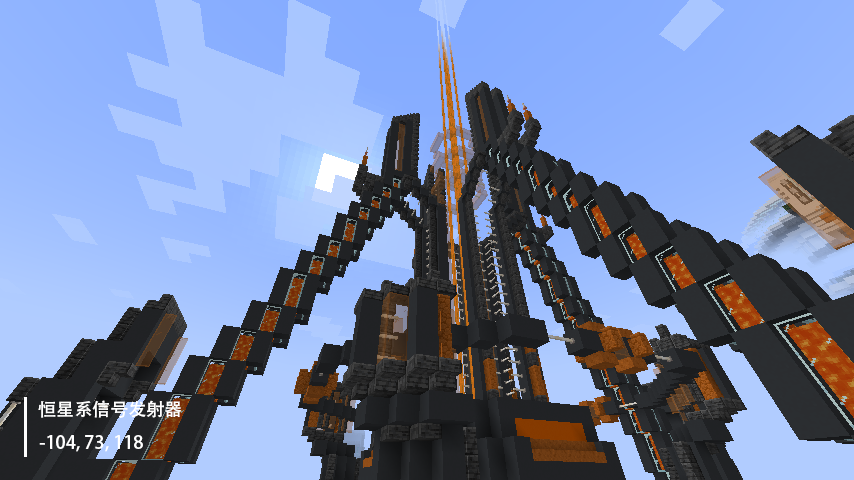
<style>
.page{position:relative;width:854px;height:480px}
.page>*{position:absolute;margin:0}
.t1{font:18px "AdobeHeitiStd-Regular";color:#ffffff}
</style>
<div class="page">
<p class="t1" style="left:38px;top:400px;width:143px;height:18px">恒星系信号发射器</p>
<p class="t1" style="left:39px;top:435px;width:104px;height:17px">-104, 73, 118</p>
</div>
